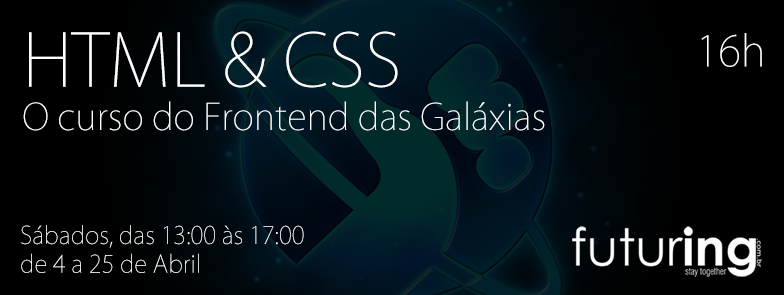
<style>
.page{position:relative;width:784px;height:295px;background:#000000}
.page>*{position:absolute;margin:0}
.t1{font:36px "KozGoPro-ExtraLight";color:#ffffff}
.t2{font:72px "KozGoPro-ExtraLight";color:#ffffff}
.t3{font:42px "KozGoPro-ExtraLight";color:#ffffff}
.t4{font:24px "KozGoPro-ExtraLight";color:#ffffff}
</style>
<div class="page">
<p class="t1" style="left:23px;top:31px;width:522px;height:100px"><span class="t2">HTML &amp; CSS<br></span>O curso do Frontend das Galáxias</p>
<p class="t3" style="left:701px;top:33px;width:61px;height:34px">16h</p>
<p class="t4" style="left:21px;top:225px;width:283px;height:48px">Sábados, das 13:00 às 17:00<br>de 4 a 25 de Abril</p>
</div>
